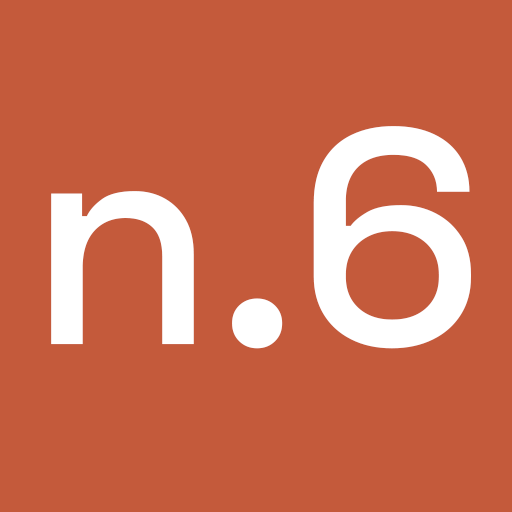
<style>
.page{position:relative;width:512px;height:512px;background:#c45a3b}
.page>*{position:absolute;margin:0}
.t1{font:305.1px "SpaceGrotesk-Medium";color:#ffffff}
</style>
<div class="page">
<p class="t1" style="left:51px;top:126px;width:420px;height:223px">n.6</p>
</div>
